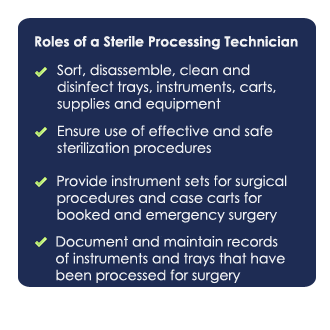
<style>
.page{position:relative;width:330px;height:330px;background:#1e2c54}
.page>*{position:absolute;margin:0}
.t1{font:14px "CenturyGothic-Bold";color:#f1f2f4}
.t2{font:14px "CenturyGothic";color:#f1f2f4}
</style>
<div class="page">
<p class="t1" style="left:35px;top:36px;width:263px;height:14px">Roles of a Sterile Processing Technician</p>
<p class="t2" style="left:57px;top:64px;width:219px;height:48px">Sort, disassemble, clean and<br>disinfect trays, instruments, carts,<br>supplies and equipment</p>
<p class="t2" style="left:57px;top:125px;width:216px;height:31px">Ensure use of effective and safe<br>sterilization procedures</p>
<p class="t2" style="left:57px;top:175px;width:230px;height:48px">Provide instrument sets for surgical<br>procedures and case carts for<br>booked and emergency surgery</p>
<p class="t2" style="left:56px;top:236px;width:229px;height:48px">Document and maintain records<br>of instruments and trays that have<br>been processed for surgery</p>
</div>
